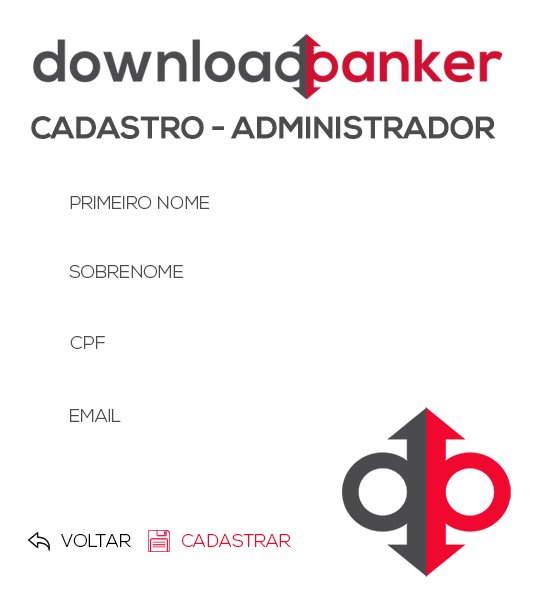
<style>
.page{position:relative;width:535px;height:600px;background:#ffffff}
.page>*{position:absolute;margin:0}
.t1{font:18px "NexaLight";color:#4c4c4c}
.t2{font:18.1px "NexaLight";color:#4c4c4c}
.t3{font:18px "NexaLight";color:#000000}
.t4{font:18px "NexaLight";color:#f0082e}
</style>
<div class="page">
<p class="t1" style="left:70px;top:196px;width:140px;height:13px">PRIMEIRO NOME</p>
<p class="t2" style="left:69px;top:265px;width:114px;height:13px">SOBRENOME</p>
<p class="t2" style="left:70px;top:336px;width:35px;height:13px">CPF</p>
<p class="t2" style="left:70px;top:409px;width:51px;height:13px">EMAIL</p>
<p class="t3" style="left:61px;top:534px;width:70px;height:13px">VOLTAR</p>
<p class="t4" style="left:182px;top:534px;width:109px;height:13px">CADASTRAR</p>
</div>
